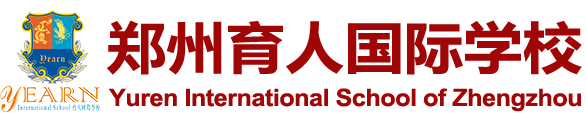
<style>
.page{position:relative;width:586px;height:122px;background:#ffffff}
.page>*{position:absolute;margin:0}
.t1{font:55px "MicrosoftYaHei-Bold";letter-spacing:0.01em;color:#a00606;scale:1.07 1}
.t2{font:24px "Arial-BoldMT";letter-spacing:-0.02em;color:#a00606;scale:1.05 1}
</style>
<div class="page">
<p class="t1" style="left:107px;top:20px;width:475px;height:55px">郑州育人国际学校</p>
<p class="t2" style="left:108px;top:88px;width:473px;height:24px">Yuren International School of Zhengzhou</p>
</div>
